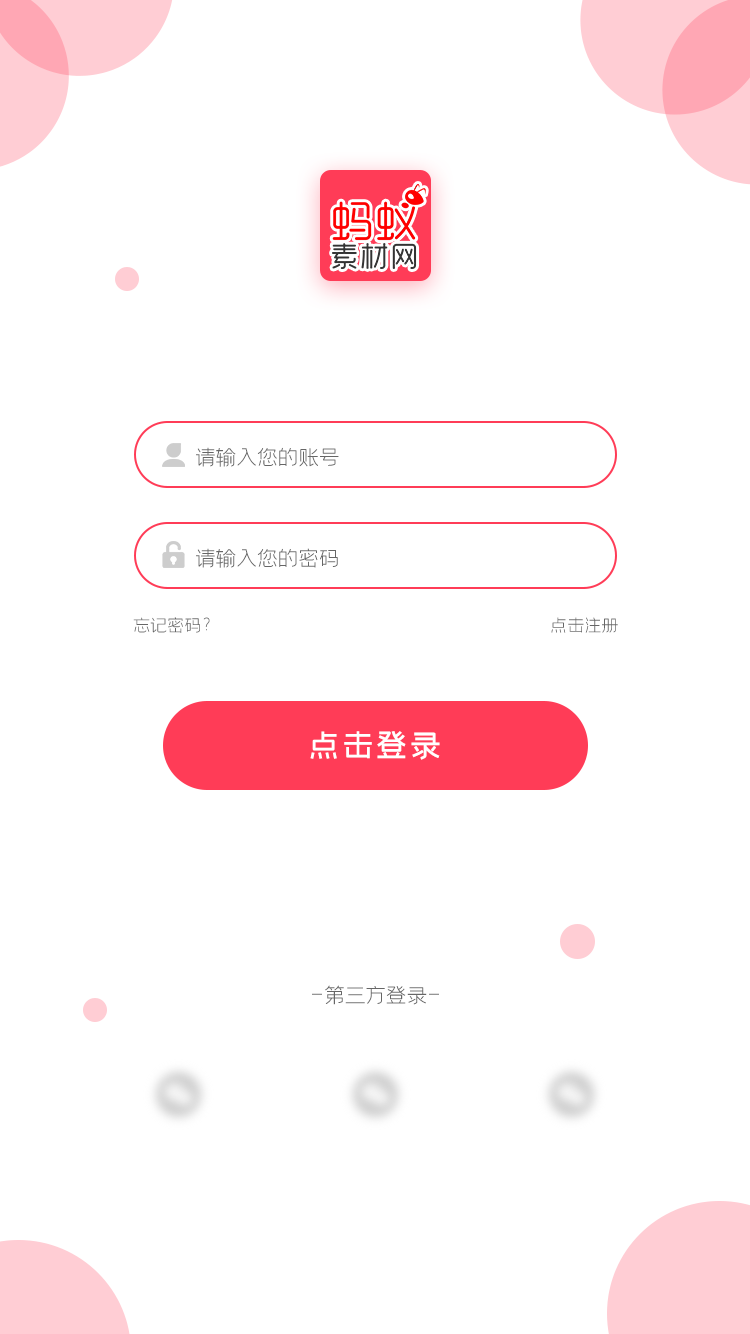
<style>
.page{position:relative;width:750px;height:1334px;background:#ffffff}
.page>*{position:absolute;margin:0}
.t1{font:24px "58--Regular";letter-spacing:-0.14em;color:#666666;text-transform:uppercase}
.t2{font:20px "58--Regular";letter-spacing:-0.14em;color:#666666;text-transform:uppercase}
.t3{font:36px "59--Regular";letter-spacing:-0.06em;color:#ffffff;text-transform:uppercase}
</style>
<div class="page">
<p class="t1" style="left:196px;top:447px;width:143px;height:20px">请输入您的账号</p>
<p class="t1" style="left:196px;top:548px;width:142px;height:20px">请输入您的密码</p>
<p class="t2" style="left:133px;top:617px;width:77px;height:16px">忘记密码?</p>
<p class="t2" style="left:551px;top:617px;width:67px;height:16px">点击注册</p>
<p class="t3" style="left:310px;top:731px;width:130px;height:29px">点击登录</p>
<p class="t1" style="left:312px;top:985px;width:127px;height:20px">- 第三方登录 -</p>
</div>
